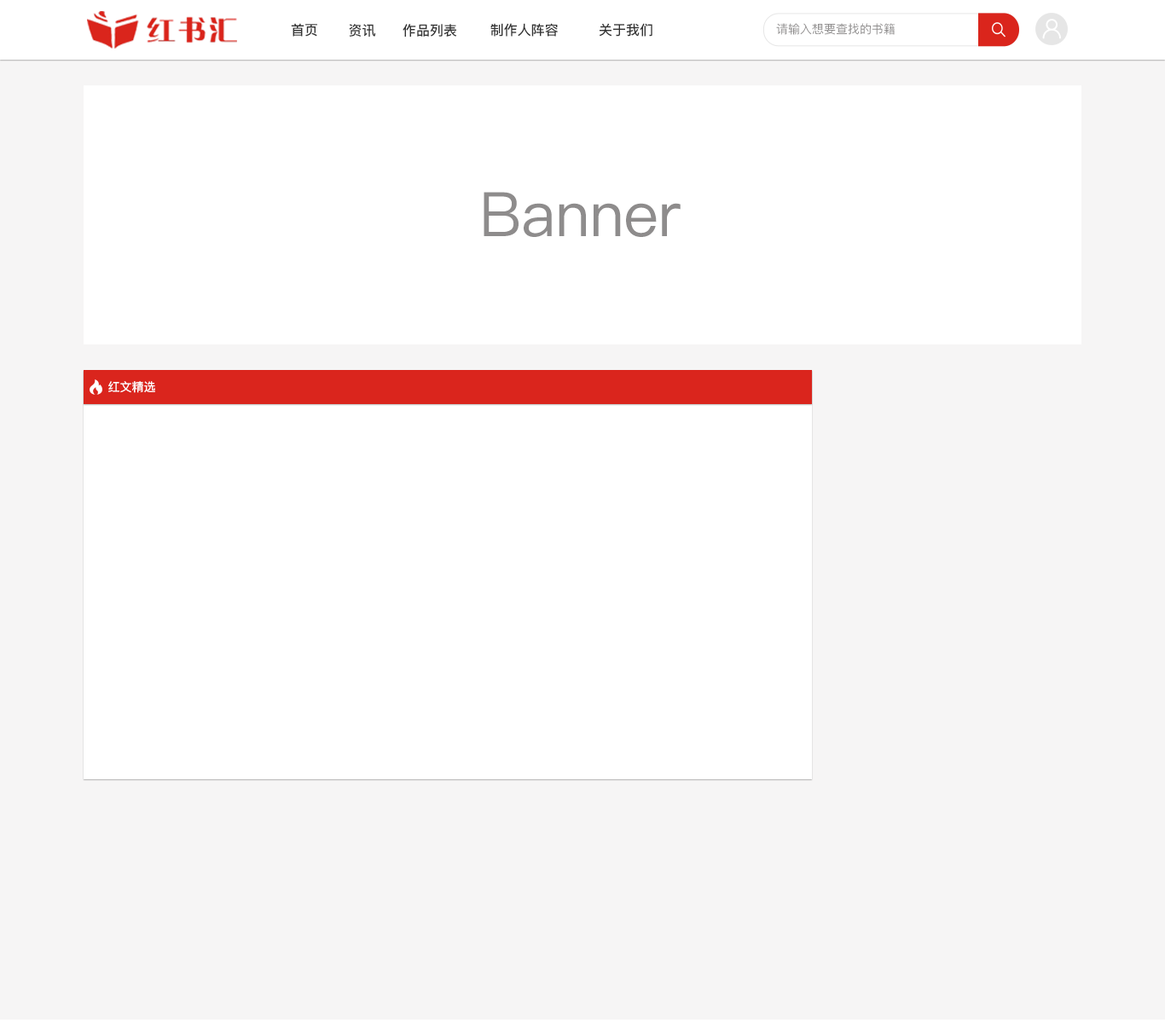
<style>
.page{position:relative;width:1165px;height:1023px;background:#ffffff}
.page>*{position:absolute;margin:0}
.t1{font:13.6px "PingFangSC-Medium";color:#333333}
.t2{font:11.9px "PingFangSC-Regular";color:#8e8c8c}
.t3{font:61.4px "PingFangSC-Regular";color:#8e8c8c}
.t4{font:11.9px "PingFangSC-Medium";color:#ffffff}
</style>
<div class="page">
<p class="t1" style="left:291px;top:23px;width:26px;height:14px">首页</p>
<p class="t1" style="left:349px;top:24px;width:26px;height:13px">资讯</p>
<p class="t1" style="left:403px;top:24px;width:54px;height:13px">作品列表</p>
<p class="t1" style="left:490px;top:23px;width:68px;height:14px">制作人阵容</p>
<p class="t1" style="left:599px;top:23px;width:53px;height:14px">关于我们</p>
<p class="t2" style="left:776px;top:23px;width:120px;height:12px">请输入想要查找的书籍</p>
<p class="t3" style="left:484px;top:192px;width:197px;height:45px">Banner</p>
<p class="t4" style="left:108px;top:381px;width:47px;height:12px">红文精选</p>
</div>
